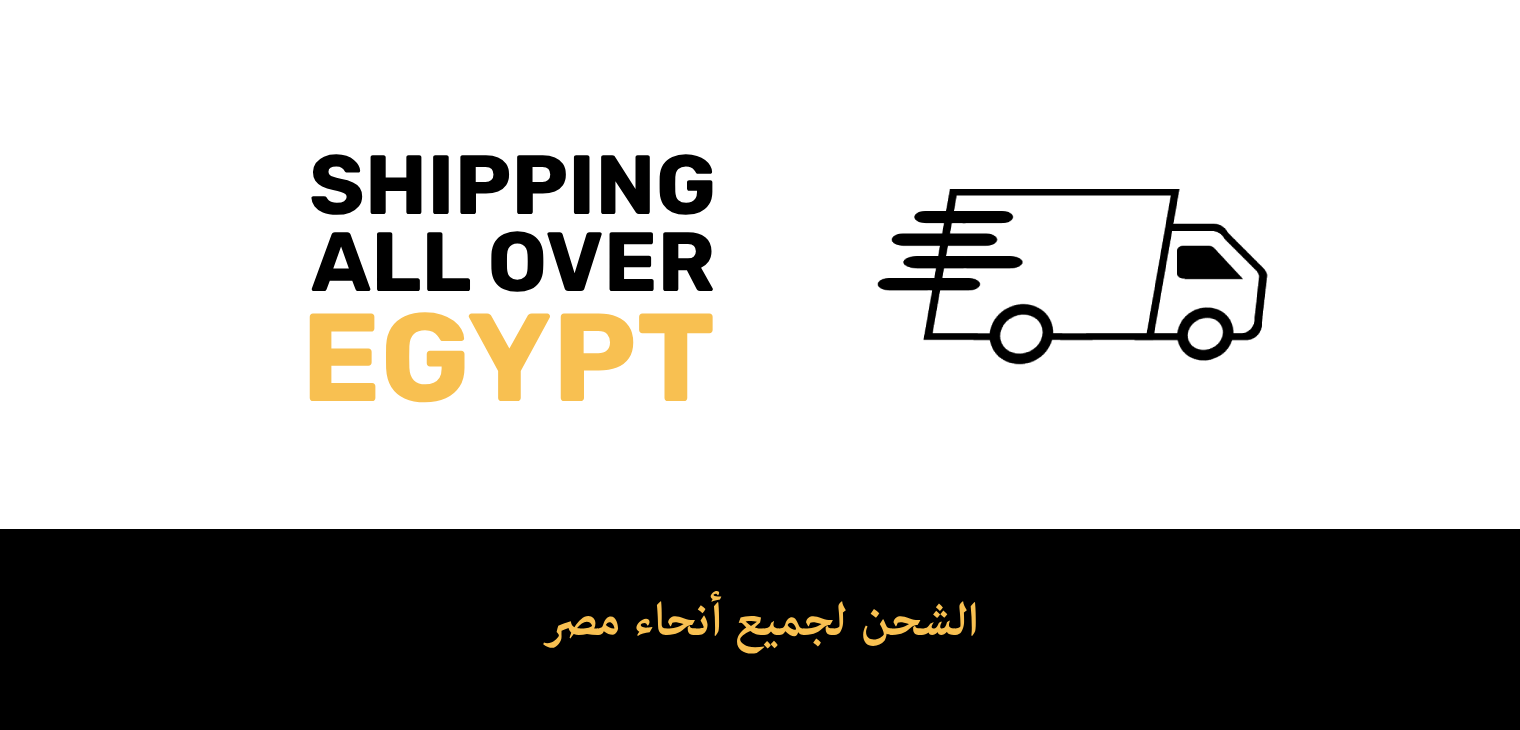
<style>
.page{position:relative;width:1520px;height:730px;background:#ffffff}
.page>*{position:absolute;margin:0}
.t1{font:84px "Rubik-Bold";color:#000000}
.t2{font:125px "Rubik-Bold";color:#f8c051}
.t3{font:67px "AdobeArabic-Bold";color:#f8c051}
</style>
<div class="page">
<p class="t1" style="left:311px;top:154px;width:402px;height:61px">SHIPPING</p>
<p class="t1" style="left:311px;top:231px;width:402px;height:61px">ALL OVER</p>
<p class="t2" style="left:309px;top:312px;width:404px;height:91px">EGYPT</p>
<p class="t3" style="left:543px;top:590px;width:433px;height:64px">الشحن لجميع أنحاء مصر</p>
</div>
